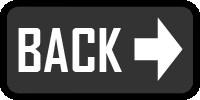
<style>
.page{position:relative;width:200px;height:100px;background:#333333}
.page>*{position:absolute;margin:0}
.t1{font:58.3px "AgencyFB-Bold";color:#ffffff}
</style>
<div class="page">
<p class="t1" style="left:18px;top:28px;width:104px;height:44px">BACK</p>
</div>
